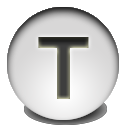
<style>
.page{position:relative;width:128px;height:128px;background:#ffffff}
.page>*{position:absolute;margin:0}
.t1{font:86px "Helvetica-Bold"}
</style>
<div class="page">
<p class="t1" style="left:38px;top:37px;width:51px;height:62px">T</p>
</div>
